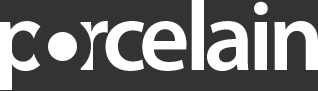
<style>
.page{position:relative;width:318px;height:91px;background:#333333}
.page>*{position:absolute;margin:0}
.t1{font:98.8px "MyriadPro-Semibold";letter-spacing:-0.06em;color:#ffffff}
</style>
<div class="page">
<p class="t1" style="left:0px;top:0px;width:318px;height:90px">p  rcelain</p>
</div>
